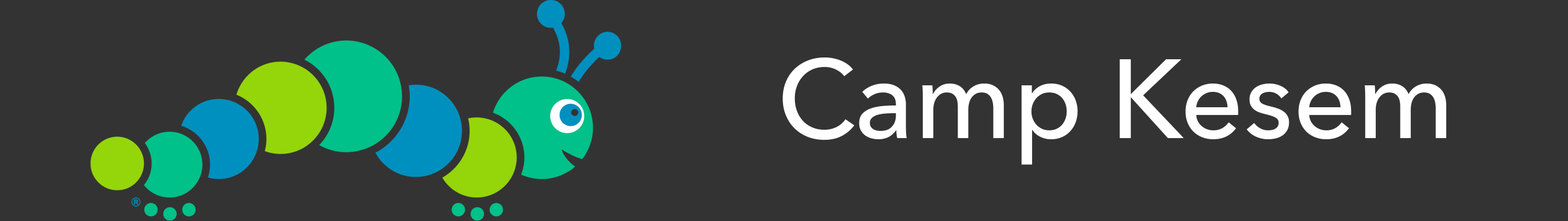
<style>
.page{position:relative;width:1568px;height:221px;background:#333333}
.page>*{position:absolute;margin:0}
.t1{font:110.9px "AvenirNext-Medium";color:#ffffff}
</style>
<div class="page">
<p class="t1" style="left:783px;top:57px;width:664px;height:107px">Camp Kesem</p>
</div>
